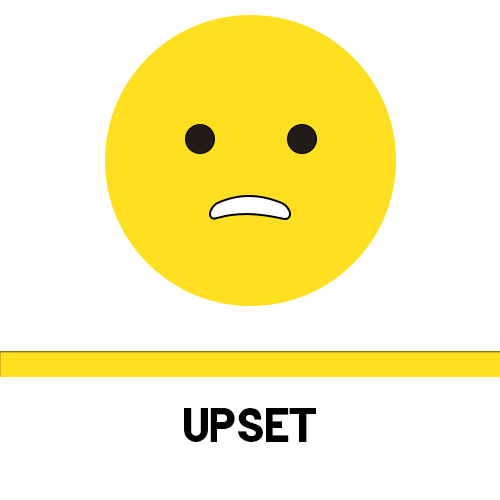
<style>
.page{position:relative;width:500px;height:500px;background:#ffffff}
.page>*{position:absolute;margin:0}
.t1{font:48px "HotelDeParisXe";color:#000000}
</style>
<div class="page">
<p class="t1" style="left:184px;top:408px;width:132px;height:34px">upset</p>
</div>
